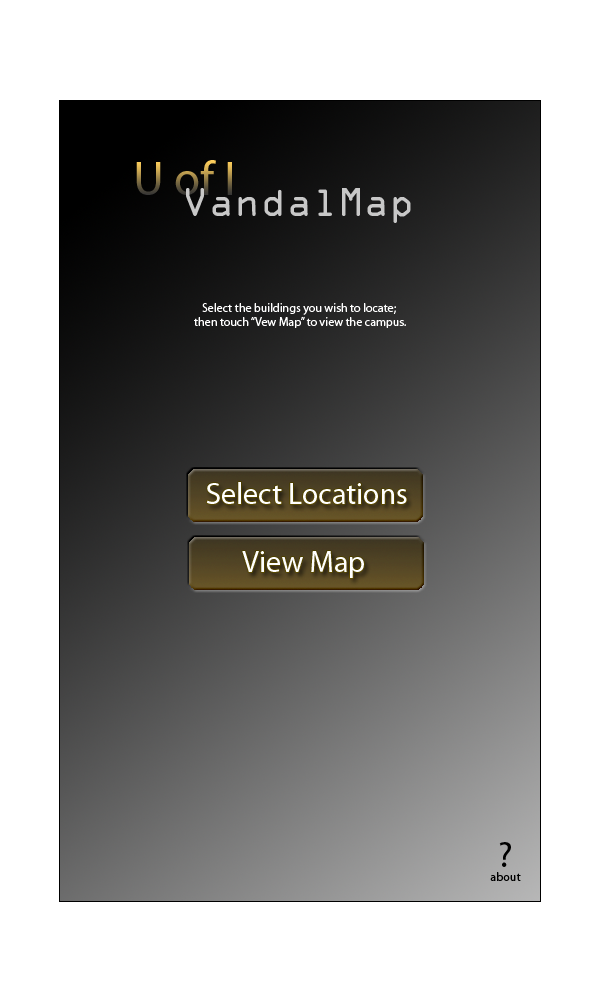
<style>
.page{position:relative;width:600px;height:1000px;background:#ffffff}
.page>*{position:absolute;margin:0}
.t1{font:48px "MyriadPro-Regular"}
.t2{font:36px "OCRAStd";color:#c8c8c8}
.t3{font:12px "MyriadPro-Regular";color:#ffffff}
.t4{font:30px "MyriadPro-Regular";color:#ffffff}
.t5{font:36px "MyriadPro-Regular";color:#000000}
.t6{font:12px "MyriadPro-Regular";color:#000000}
</style>
<div class="page">
<p class="t1" style="left:136px;top:160px;width:96px;height:35px">U of I</p>
<p class="t2" style="left:186px;top:188px;width:225px;height:35px">VandalMap</p>
<p class="t3" style="left:194px;top:303px;width:212px;height:25px;text-align:center">Select the buildings you wish to locate;<br> then touch “Vew Map” to view the campus.</p>
<p class="t4" style="left:206px;top:482px;width:201px;height:22px">Select Locations</p>
<p class="t4" style="left:242px;top:551px;width:122px;height:27px">View Map</p>
<p class="t5" style="left:499px;top:842px;width:12px;height:25px">?</p>
<p class="t6" style="left:490px;top:872px;width:31px;height:9px">about</p>
</div>
